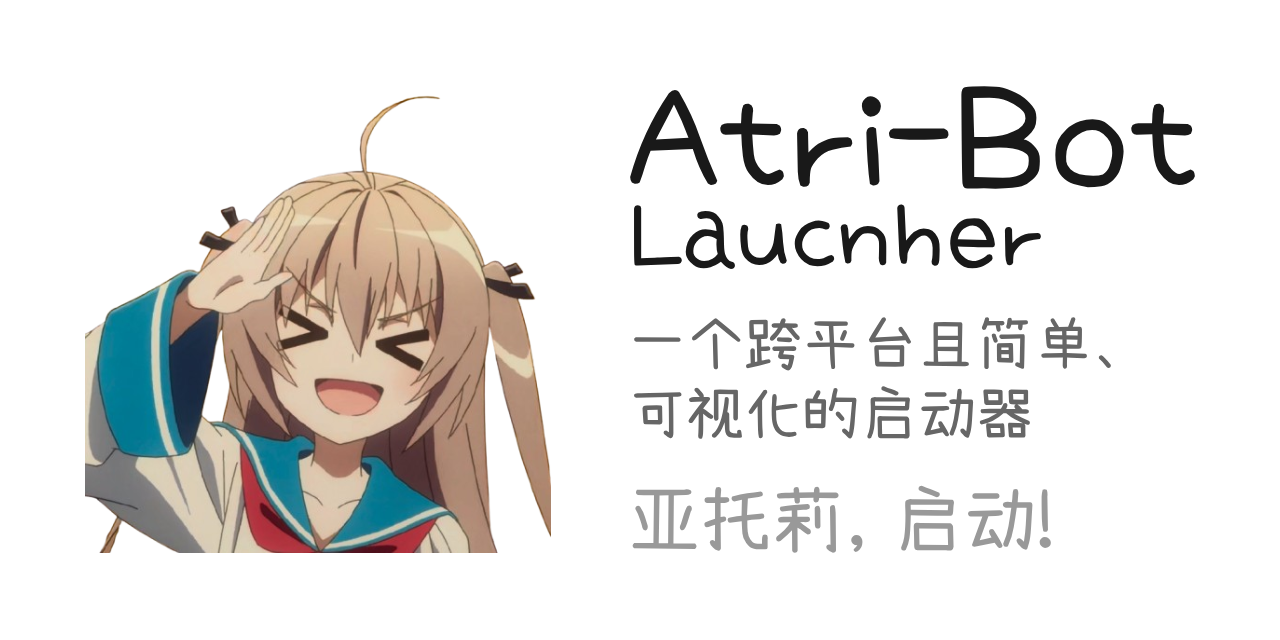
<style>
.page{position:relative;width:1280px;height:640px;background:#ffffff}
.page>*{position:absolute;margin:0}
.t1{font:144px "Xiaolai";color:#191919}
.t2{font:93.8px "Xiaolai";color:#191919}
.t3{font:58px "Xiaolai";color:#666666}
.t4{font:72px "Xiaolai";color:#999999}
</style>
<div class="page">
<p class="t1" style="left:630px;top:86px;width:565px;height:103px">Atri-Bot</p>
<p class="t2" style="left:634px;top:204px;width:407px;height:65px">Laucnher</p>
<p class="t3" style="left:634px;top:317px;width:477px;height:122px">一个跨平台且简单、<br>可视化的启动器</p>
<p class="t4" style="left:632px;top:485px;width:419px;height:68px">亚托莉, 启动!</p>
</div>
